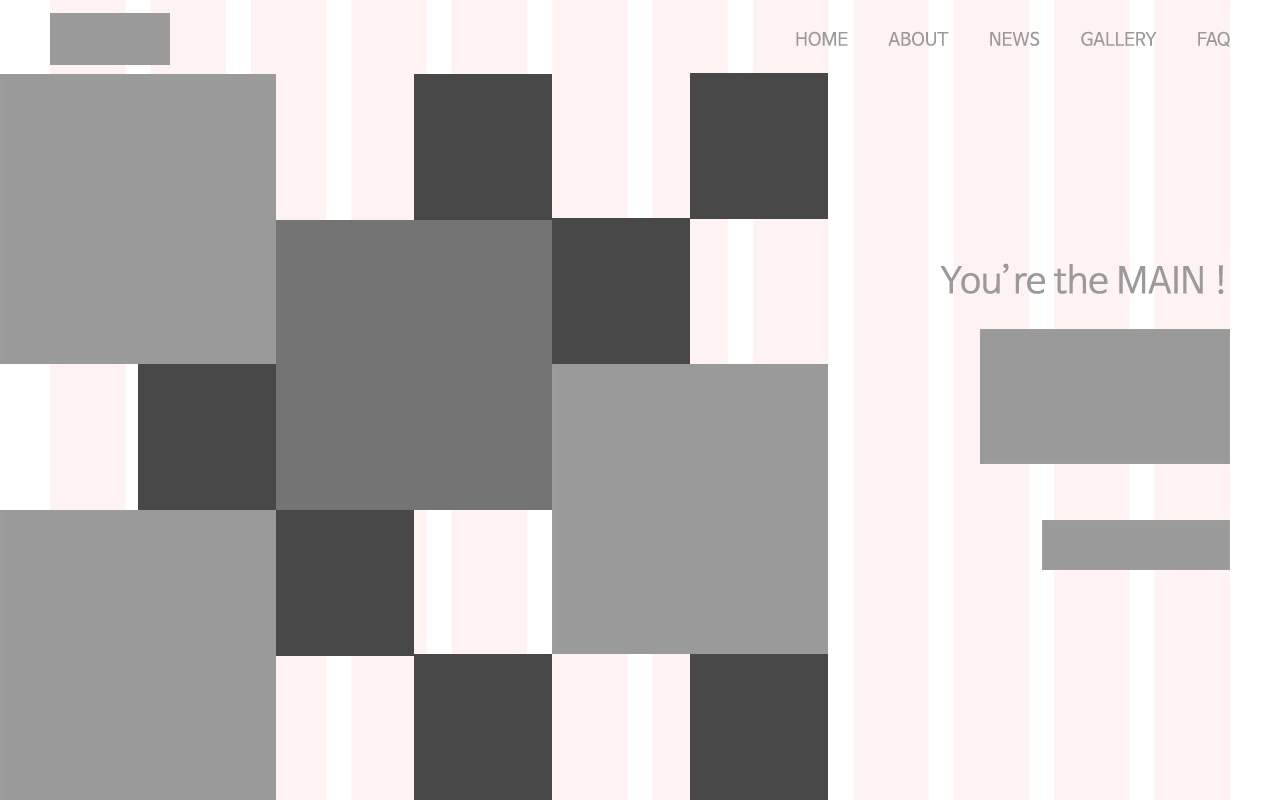
<style>
.page{position:relative;width:1280px;height:800px;background:#9a9a9a}
.page>*{position:absolute;margin:0}
.t1{font:18px "NanumBarunGothic";color:#9a9a9a}
.t2{font:36px "NanumBarunGothic";color:#9a9a9a}
</style>
<div class="page">
<p class="t1" style="left:796px;top:31px;width:434px;height:16px">HOME          ABOUT          NEWS          GALLERY          FAQ</p>
<p class="t2" style="left:940px;top:263px;width:284px;height:32px">You’re the MAIN !</p>
</div>
